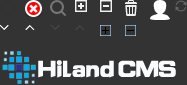
<style>
.page{position:relative;width:187px;height:85px;background:#333333}
.page>*{position:absolute;margin:0}
.t1{font:24px "HYk2gj";letter-spacing:-0.05em;color:#fbfcfd}
.t2{font:24px "HYk2gj";letter-spacing:0.1em;color:#fbfcfd}
</style>
<div class="page">
<p class="t1" style="left:38px;top:60px;width:138px;height:18px">Hilan<span class="t2">d</span>CMS</p>
</div>
